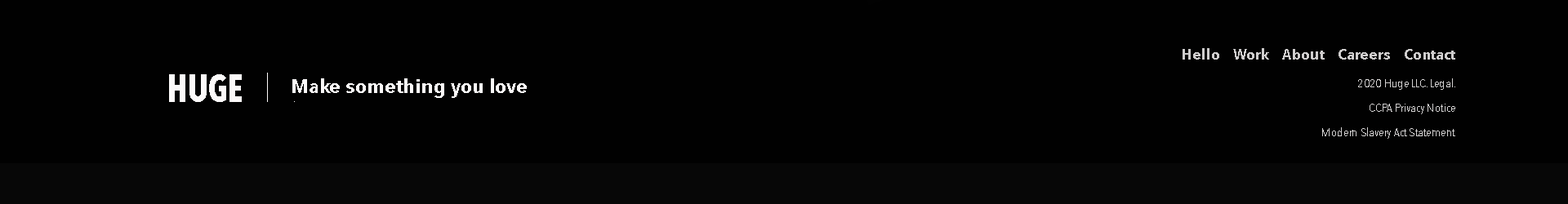
<style>
.page{position:relative;width:1568px;height:204px;background:#010101}
.page>*{position:absolute;margin:0}
.t1{font:14.7px "AvenirNextCondensed-DemiBold";color:#cfcdcd;scale:1.2 1}
.t2{font:39.2px "AvenirNextCondensed-Bold";color:#fcfafa;scale:0.88 1}
.t3{font:39.2px "AvenirNextCondensed-UltraLight";color:#fcfafa;scale:0.88 1}
.t4{font:20.3px "AvenirNextCondensed-UltraLight";color:#fcfafa;scale:0.88 1}
.t5{font:19.6px "AvenirNextCondensed-DemiBold";color:#fcfafa;scale:1.2 1}
.t6{font:11.4px/24.5px "AvenirNextCondensed-UltraLight";color:#d2d0d0;scale:1.17 1}
</style>
<div class="page">
<p class="t1" style="left:1183px;top:48px;width:272px;height:12px">Hello    Work    About    Careers    Contact</p>
<p class="t2" style="left:169px;top:73px;width:126px;height:29px">HUGE   <span class="t3">l   </span><span class="t4">.</span></p>
<p class="t5" style="left:292px;top:78px;width:235px;height:20px">Make something you love</p>
<p class="t6" style="left:1322px;top:78px;width:133px;height:61px;text-align:right">2020 Huge LLC. Legal.<br>CCPA Privacy Notice<br>Modern Slavery Act Statement</p>
</div>
